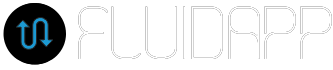
<style>
.page{position:relative;width:333px;height:70px;background:#ffffff}
.page>*{position:absolute;margin:0}
.t1{font:55px "happysquid";color:#ffffff}
</style>
<div class="page">
<p class="t1" style="left:78px;top:6px;width:254px;height:53px">fluidapp</p>
<p class="t1" style="left:78px;top:6px;width:254px;height:53px">fluidapp</p>
</div>
